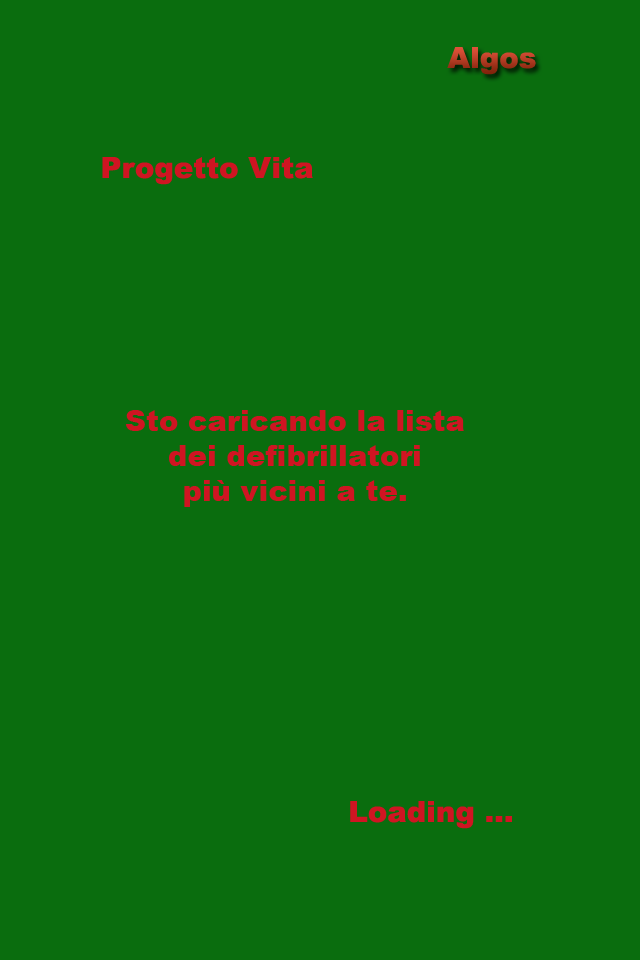
<style>
.page{position:relative;width:640px;height:960px;background:#0a6d0e}
.page>*{position:absolute;margin:0}
.t1{font:29.2px "Arial-Black";color:#d01522}
</style>
<div class="page">
<p class="t1" style="left:447px;top:47px;width:89px;height:28px">Algos</p>
<p class="t1" style="left:102px;top:157px;width:211px;height:28px">Progetto Vita</p>
<p class="t1" style="left:126px;top:410px;width:338px;height:97px;text-align:center">Sto caricando la lista<br>dei defibrillatori<br>più vicini a te.</p>
<p class="t1" style="left:350px;top:801px;width:162px;height:28px">Loading ...</p>
</div>
